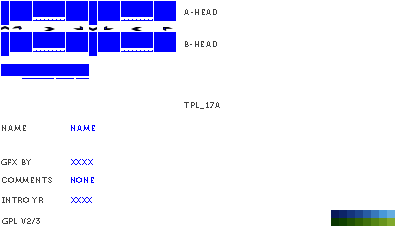
<style>
.page{position:relative;width:400px;height:230px;background:#ffffff}
.page>*{position:absolute;margin:0}
.t1{font:8px "Museo700-Regular";letter-spacing:0.075em;color:#404040;text-transform:uppercase}
.t2{font:8px "Museo700-Regular";letter-spacing:0.075em;color:#0000ff;text-transform:uppercase}
</style>
<div class="page">
<p class="t1" style="left:184px;top:9px;width:33px;height:6px">a-head</p>
<p class="t1" style="left:185px;top:41px;width:32px;height:6px">b-head</p>
<p class="t1" style="left:184px;top:102px;width:36px;height:7px">tpl_17a</p>
<p class="t1" style="left:2px;top:125px;width:24px;height:6px">name</p>
<p class="t2" style="left:71px;top:125px;width:24px;height:6px">name</p>
<p class="t1" style="left:1px;top:159px;width:30px;height:6px">gfx by</p>
<p class="t2" style="left:71px;top:159px;width:22px;height:6px">xxxx</p>
<p class="t1" style="left:2px;top:177px;width:50px;height:6px">comments</p>
<p class="t2" style="left:71px;top:177px;width:23px;height:6px">none</p>
<p class="t1" style="left:2px;top:197px;width:41px;height:6px">intro yr</p>
<p class="t2" style="left:71px;top:197px;width:21px;height:6px">xxxx</p>
<p class="t1" style="left:2px;top:218px;width:38px;height:6px">gpl v2/3</p>
</div>
